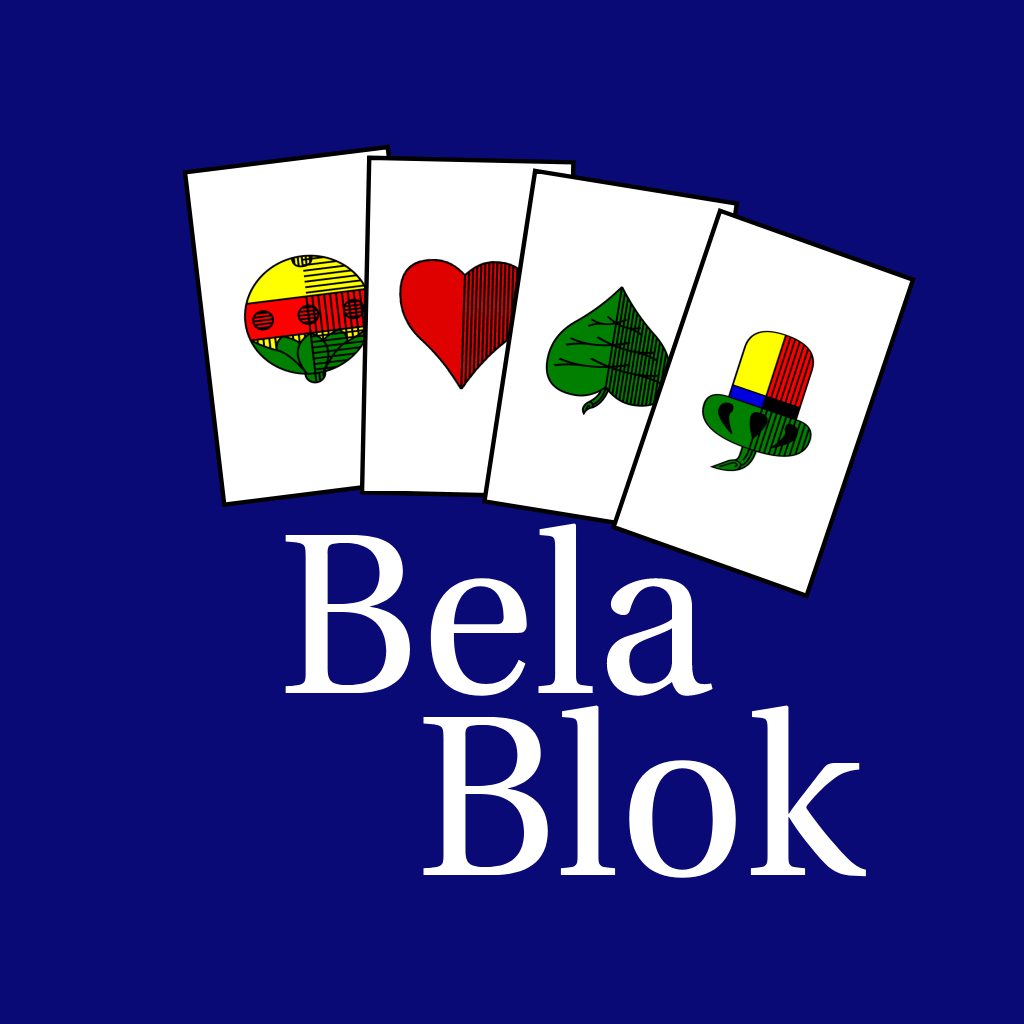
<style>
.page{position:relative;width:1024px;height:1024px;background:#0a0a77}
.page>*{position:absolute;margin:0}
.t1{font:228.5px "Heuristica-Regular";color:#ffffff}
</style>
<div class="page">
<p class="t1" style="left:285px;top:523px;width:428px;height:173px">Bela</p>
<p class="t1" style="left:423px;top:705px;width:443px;height:173px">Blok</p>
</div>
